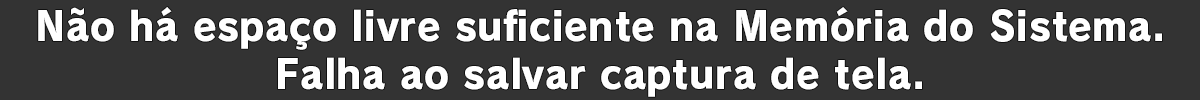
<style>
.page{position:relative;width:1200px;height:100px;background:#333333}
.page>*{position:absolute;margin:0}
.t1{font:40px "RodinPro-EB";letter-spacing:0.015em;color:#ffffff;scale:0.95 1}
</style>
<div class="page">
<p class="t1" style="left:38px;top:7px;width:1124px;height:43px">Não há espaço livre suficiente na Memória do Sistema.</p>
<p class="t1" style="left:278px;top:57px;width:644px;height:40px">Falha ao salvar captura de tela.</p>
</div>
